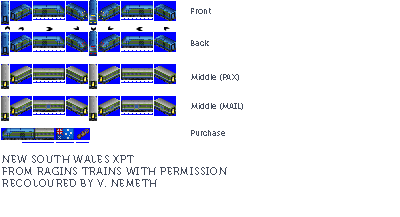
<style>
.page{position:relative;width:400px;height:217px;background:#ffffff}
.page>*{position:absolute;margin:0}
.t1{font:8px "Museo700-Regular";color:#444c5c}
.t2{font:10px "Museo700-Regular";letter-spacing:0.075em;color:#444c5c;text-transform:uppercase}
</style>
<div class="page">
<p class="t1" style="left:191px;top:8px;width:20px;height:6px">Front</p>
<p class="t1" style="left:191px;top:40px;width:18px;height:6px">Back</p>
<p class="t1" style="left:191px;top:74px;width:48px;height:7px">Middle (PAX)</p>
<p class="t1" style="left:191px;top:103px;width:52px;height:7px">Middle (MAIL)</p>
<p class="t1" style="left:191px;top:130px;width:34px;height:6px">Purchase</p>
<p class="t2" style="left:2px;top:155px;width:225px;height:32px">New South Wales XPT<br>from ragins trains with permission<br>recoloured by v. nemeth</p>
</div>
